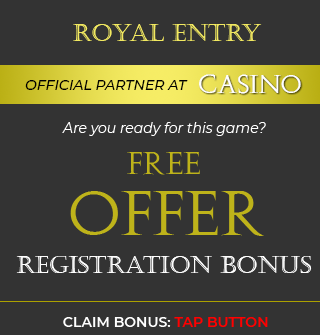
<style>
.page{position:relative;width:320px;height:335px;background:#333333}
.page>*{position:absolute;margin:0}
.t1{font:24px "Castellar";color:#f2e960}
.t2{font:24px "Augustus";color:#ffffff}
.t3{font:14px "Montserrat-MediumItalic";color:#000000}
.t4{font:14px "Montserrat-Italic";color:#ffffff}
.t5{font:30px "Augustus";color:#beb31a}
.t6{font:60px "Augustus";color:#beb31a}
.t7{font:24px "Castellar";color:#ffffff}
.t8{font:14px "Montserrat-SemiBold";color:#ffffff}
.t9{font:14px "Montserrat-SemiBold";color:#ff0000}
</style>
<div class="page">
<p class="t1" style="left:73px;top:24px;width:189px;height:17px">ROYAL ENTRY</p>
<p class="t2" style="left:199px;top:74px;width:102px;height:20px">CASINO</p>
<p class="t3" style="left:25px;top:80px;width:163px;height:10px">OFFICIAL PARTNER AT</p>
<p class="t4" style="left:62px;top:122px;width:204px;height:14px">Are you ready for this game?</p>
<p class="t5" style="left:127px;top:152px;width:73px;height:23px">FREE</p>
<p class="t6" style="left:70px;top:191px;width:194px;height:45px">OFFER</p>
<p class="t7" style="left:16px;top:256px;width:296px;height:17px">REGistration bonus</p>
<p class="t8" style="left:63px;top:317px;width:205px;height:10px">CLAIM BONUS: <span class="t9">TAP BUTTON</span></p>
</div>
